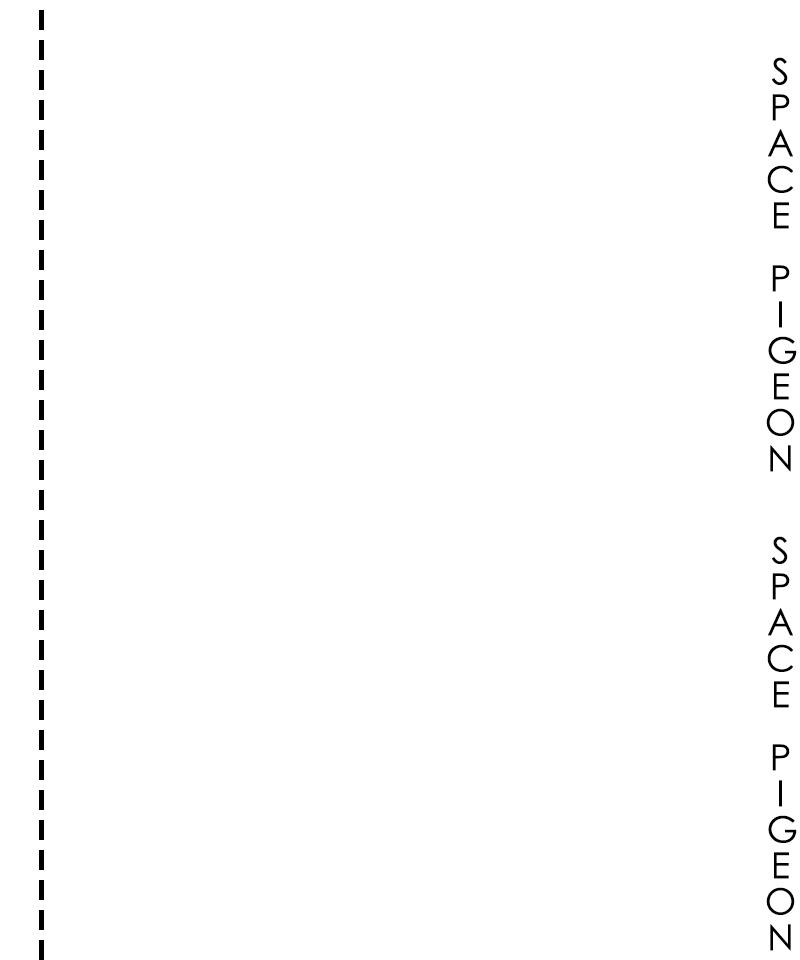
<style>
.page{position:relative;width:800px;height:960px;background:#ffffff}
.page>*{position:absolute;margin:0}
.t1{font:36px "STXihei";color:#000000}
</style>
<div class="page">
<p class="t1" style="left:766px;top:57px;width:31px;height:415px">SPACE   PIGEON</p>
<p class="t1" style="left:766px;top:536px;width:31px;height:415px">SPACE   PIGEON</p>
</div>
